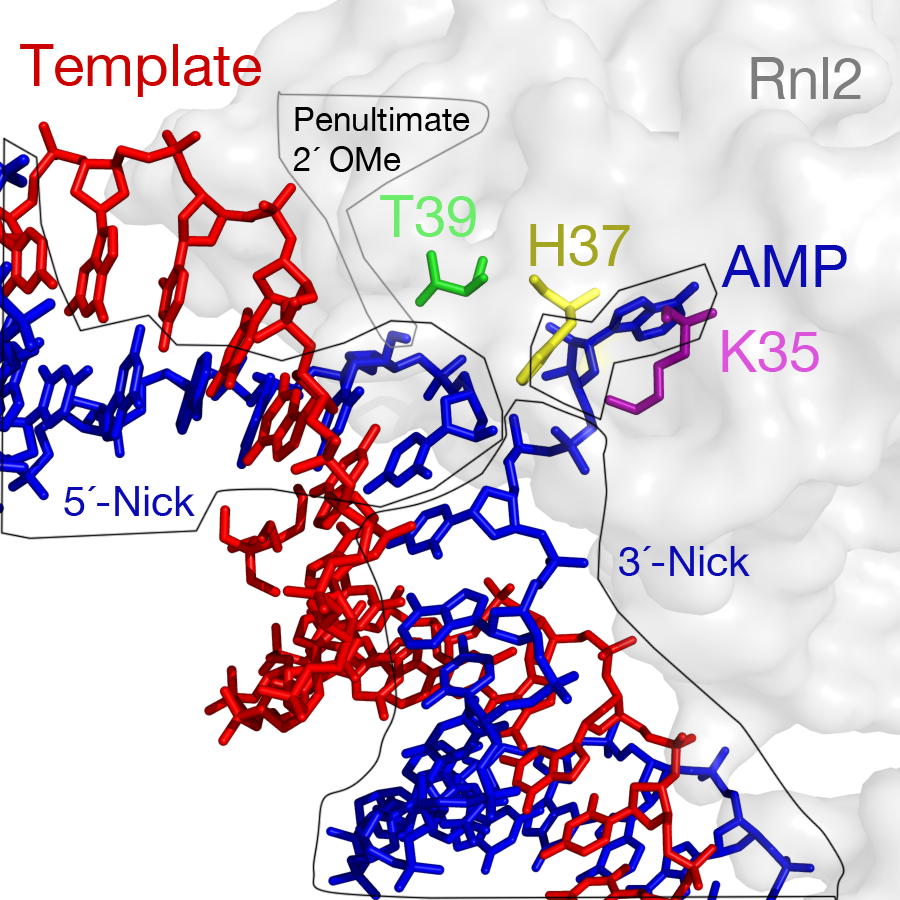
<style>
.page{position:relative;width:900px;height:900px;background:#ffffff}
.page>*{position:absolute;margin:0}
.t1{font:58.3px "HelveticaNeue";color:#cd0000}
.t2{font:58.3px "HelveticaNeue";color:#7d7d7d}
.t3{font:33.3px "HelveticaNeue";color:#000000}
.t4{font:58.3px "HelveticaNeue";color:#6bec6b}
.t5{font:58.3px "HelveticaNeue";color:#a5a524}
.t6{font:58.3px "HelveticaNeue";color:#0b0bb4}
.t7{font:58.3px "HelveticaNeue";color:#dc53dc}
.t8{font:41.7px "HelveticaNeue";color:#0b0bb4}
</style>
<div class="page">
<p class="t1" style="left:20px;top:44px;width:241px;height:53px">Template</p>
<p class="t2" style="left:751px;top:57px;width:110px;height:42px">Rnl2</p>
<p class="t3" style="left:293px;top:107px;width:177px;height:65px">Penultimate <br>2´ OMe</p>
<p class="t4" style="left:380px;top:195px;width:96px;height:42px">T39</p>
<p class="t5" style="left:530px;top:224px;width:100px;height:42px">H37</p>
<p class="t6" style="left:721px;top:245px;width:126px;height:42px">AMP</p>
<p class="t7" style="left:722px;top:330px;width:97px;height:42px">K35</p>
<p class="t8" style="left:64px;top:486px;width:131px;height:30px">5´-Nick</p>
<p class="t8" style="left:619px;top:546px;width:131px;height:30px">3´-Nick</p>
</div>
